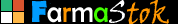
<style>
.page{position:relative;width:178px;height:24px;background:#000000}
.page>*{position:absolute;margin:0}
.t1{font:30.7px "VinerHandITC";color:#ff9600;scale:0.88 1}
.t2{font:30.7px "BerlinSansFB-Bold";color:#009cff;scale:0.88 1}
.t3{font:30.7px "BerlinSansFB-Reg";color:#ffffff;scale:0.88 1}
.t4{font:30.7px "BerlinSansFB-Reg";color:#ff9600;scale:0.88 1}
.t5{font:30.7px "BerlinSansFB-Reg";color:#42ff00;scale:0.88 1}
.t6{font:30.7px "VinerHandITC";color:#ffffff;scale:0.88 1}
</style>
<div class="page">
<p class="t1" style="left:32px;top:0px;width:137px;height:26px"><span class="t2">F</span><span class="t3">a</span><span class="t4">r</span><span class="t3">m</span><span class="t5">a</span><span class="t6">S</span>tok</p>
</div>
